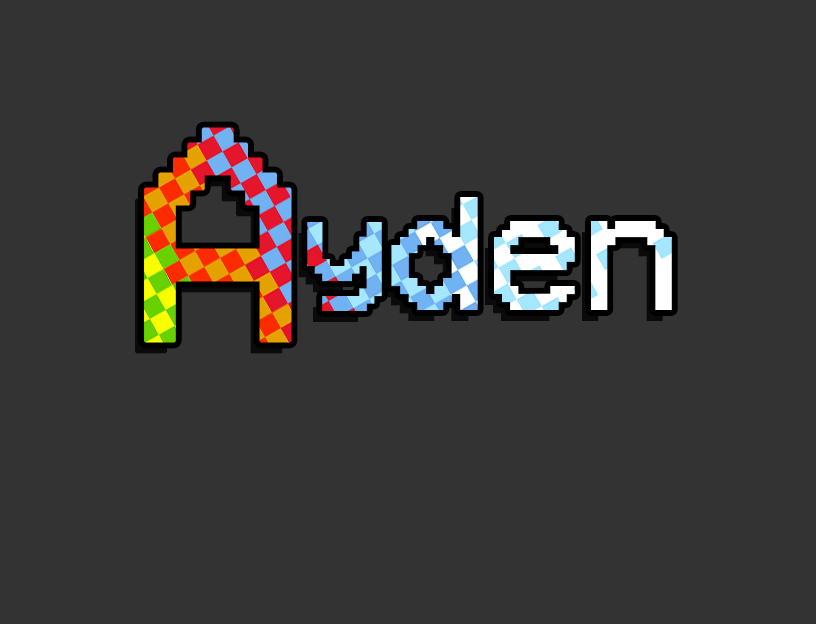
<style>
.page{position:relative;width:816px;height:624px;background:#333333}
.page>*{position:absolute;margin:0}
.t1{font:164.8px "VCROSDMono"}
.t2{font:309.6px "VCROSDMono";letter-spacing:-0.04em;font-weight:bold;scale:0.95 1}
.t3{font:152.3px "VCROSDMono";letter-spacing:-0.04em}
.t4{font:164.6px "VCROSDMono";scale:1.07 1}
</style>
<div class="page">
<p class="t1" style="left:144px;top:127px;width:528px;height:216px"><span class="t2">A</span><span class="t3">y</span><span class="t4">d</span>en</p>
</div>
